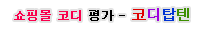
<style>
.page{position:relative;width:210px;height:30px;background:#ffffff}
.page>*{position:absolute;margin:0}
.t1{font:12px "Dotum";color:#fa004c;font-weight:bold}
.t2{font:12px "Dotum";color:#000000;font-weight:bold}
.t3{font:11px "Dotum";color:#000000;font-weight:bold}
.t4{font:14px "Dotum";color:#e00000;font-weight:bold}
.t5{font:14px "Dotum";color:#9d00de;font-weight:bold}
.t6{font:14px "Dotum";color:#0032d4;font-weight:bold}
.t7{font:14px "Dotum";color:#3d8f00;font-weight:bold}
</style>
<div class="page">
<p class="t1" style="left:14px;top:8px;width:175px;height:13px">쇼핑몰 코디 <span class="t2">평가</span><span class="t3"> - </span><span class="t4">코</span><span class="t5">디</span><span class="t6">탑</span><span class="t7">텐</span></p>
</div>
